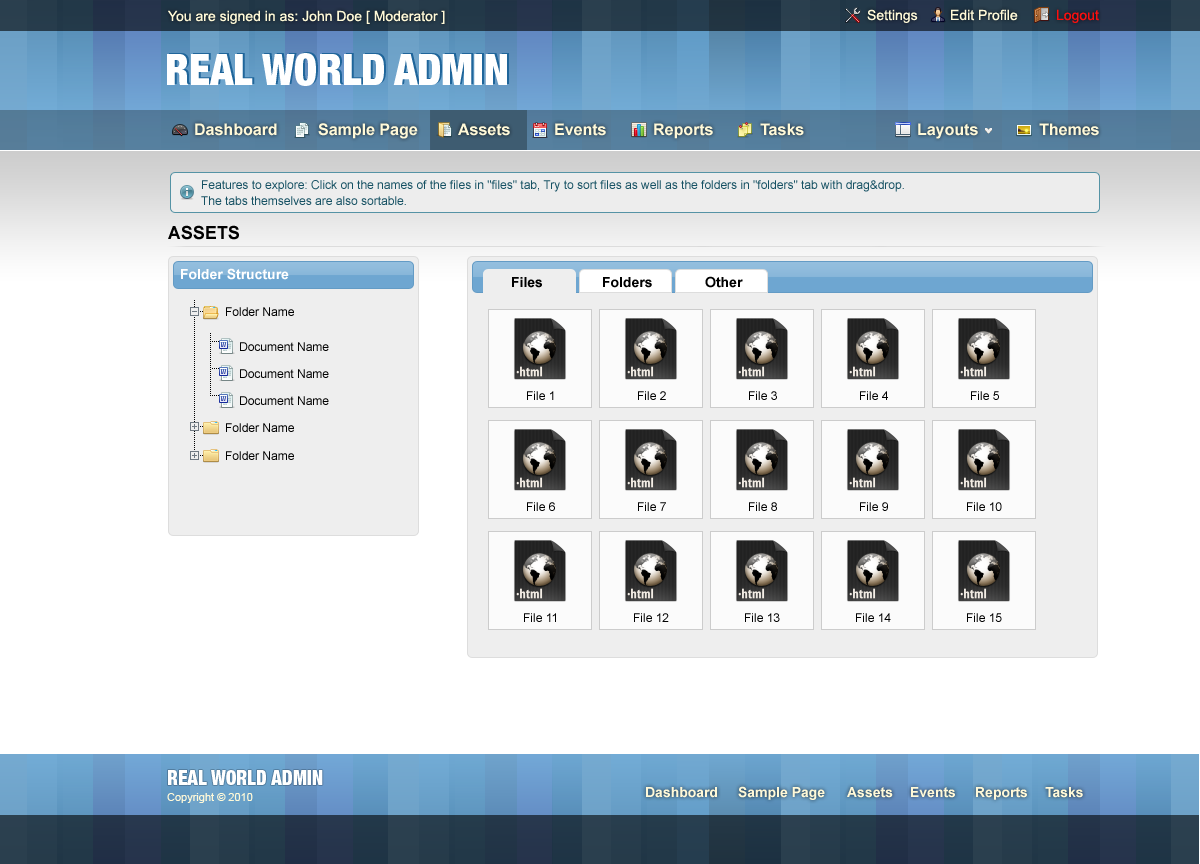
<style>
.page{position:relative;width:1200px;height:864px;background:#ffffff}
.page>*{position:absolute;margin:0}
.t1{font:14px "ArialMT";color:#fff9d7}
.t2{font:14px "ArialMT";color:#fff9d8}
.t3{font:14px "ArialMT";color:#fa0f0f}
.t4{font:16px "Arial-BoldMT";color:#fff9d8}
.t5{font:12px/16px "ArialMT";color:#165163}
.t6{font:18px "Arial-BoldMT";color:#000000;text-transform:uppercase}
.t7{font:14px "Arial-BoldMT";color:#ffffff}
.t8{font:14px "Arial-BoldMT";color:#000000}
.t9{font:12px "ArialMT";color:#010101}
.t10{font:11px "ArialMT";color:#fff9d8}
.t11{font:14px "Arial-BoldMT";color:#fff9d8}
</style>
<div class="page">
<p class="t1" style="left:168px;top:10px;width:277px;height:14px">You are signed in as: John Doe [ Moderator ]</p>
<p class="t2" style="left:867px;top:9px;width:51px;height:14px">Settings</p>
<p class="t2" style="left:951px;top:9px;width:67px;height:12px">Edit Profile</p>
<p class="t3" style="left:1057px;top:9px;width:42px;height:14px">Logout</p>
<p class="t4" style="left:195px;top:123px;width:82px;height:13px">Dashboard</p>
<p class="t4" style="left:318px;top:123px;width:100px;height:16px">Sample Page</p>
<p class="t4" style="left:458px;top:123px;width:52px;height:13px">Assets</p>
<p class="t4" style="left:555px;top:123px;width:51px;height:13px">Events</p>
<p class="t4" style="left:654px;top:123px;width:59px;height:16px">Reports</p>
<p class="t4" style="left:760px;top:123px;width:44px;height:13px">Tasks</p>
<p class="t4" style="left:918px;top:123px;width:60px;height:16px">Layouts</p>
<p class="t4" style="left:1039px;top:123px;width:60px;height:13px">Themes</p>
<p class="t5" style="left:201px;top:180px;width:703px;height:25px">Features to explore: Click on the names of the files in "files" tab, Try to sort files as well as the folders in "folders" tab with drag&amp;drop.<br>The tabs themselves are also sortable.</p>
<p class="t6" style="left:168px;top:225px;width:71px;height:15px">Assets</p>
<p class="t7" style="left:181px;top:268px;width:108px;height:12px">Folder Structure</p>
<p class="t8" style="left:512px;top:277px;width:30px;height:11px">Files</p>
<p class="t8" style="left:603px;top:277px;width:49px;height:11px">Folders</p>
<p class="t8" style="left:705px;top:276px;width:38px;height:12px">Other</p>
<p class="t9" style="left:226px;top:307px;width:68px;height:9px">Folder Name</p>
<p class="t9" style="left:240px;top:342px;width:89px;height:9px">Document Name</p>
<p class="t9" style="left:240px;top:369px;width:89px;height:9px">Document Name</p>
<p class="t9" style="left:240px;top:396px;width:89px;height:9px">Document Name</p>
<p class="t9" style="left:527px;top:391px;width:27px;height:9px">File 1</p>
<p class="t9" style="left:638px;top:391px;width:28px;height:9px">File 2</p>
<p class="t9" style="left:749px;top:391px;width:28px;height:9px">File 3</p>
<p class="t9" style="left:860px;top:391px;width:28px;height:9px">File 4</p>
<p class="t9" style="left:971px;top:391px;width:28px;height:9px">File 5</p>
<p class="t9" style="left:226px;top:423px;width:68px;height:9px">Folder Name</p>
<p class="t9" style="left:226px;top:451px;width:68px;height:9px">Folder Name</p>
<p class="t9" style="left:527px;top:502px;width:28px;height:9px">File 6</p>
<p class="t9" style="left:638px;top:502px;width:28px;height:9px">File 7</p>
<p class="t9" style="left:749px;top:502px;width:28px;height:9px">File 8</p>
<p class="t9" style="left:860px;top:502px;width:28px;height:9px">File 9</p>
<p class="t9" style="left:967px;top:502px;width:35px;height:9px">File 10</p>
<p class="t9" style="left:524px;top:613px;width:32px;height:9px">File 11</p>
<p class="t9" style="left:634px;top:613px;width:35px;height:9px">File 12</p>
<p class="t9" style="left:745px;top:613px;width:35px;height:9px">File 13</p>
<p class="t9" style="left:856px;top:613px;width:35px;height:9px">File 14</p>
<p class="t9" style="left:967px;top:613px;width:35px;height:9px">File 15</p>
<p class="t10" style="left:167px;top:793px;width:86px;height:10px">Copyright © 2010</p>
<p class="t11" style="left:646px;top:787px;width:71px;height:11px">Dashboard</p>
<p class="t11" style="left:738px;top:786px;width:87px;height:14px">Sample Page</p>
<p class="t11" style="left:847px;top:787px;width:46px;height:11px">Assets</p>
<p class="t11" style="left:911px;top:787px;width:44px;height:11px">Events</p>
<p class="t11" style="left:976px;top:787px;width:51px;height:13px">Reports</p>
<p class="t11" style="left:1045px;top:787px;width:38px;height:11px">Tasks</p>
</div>
